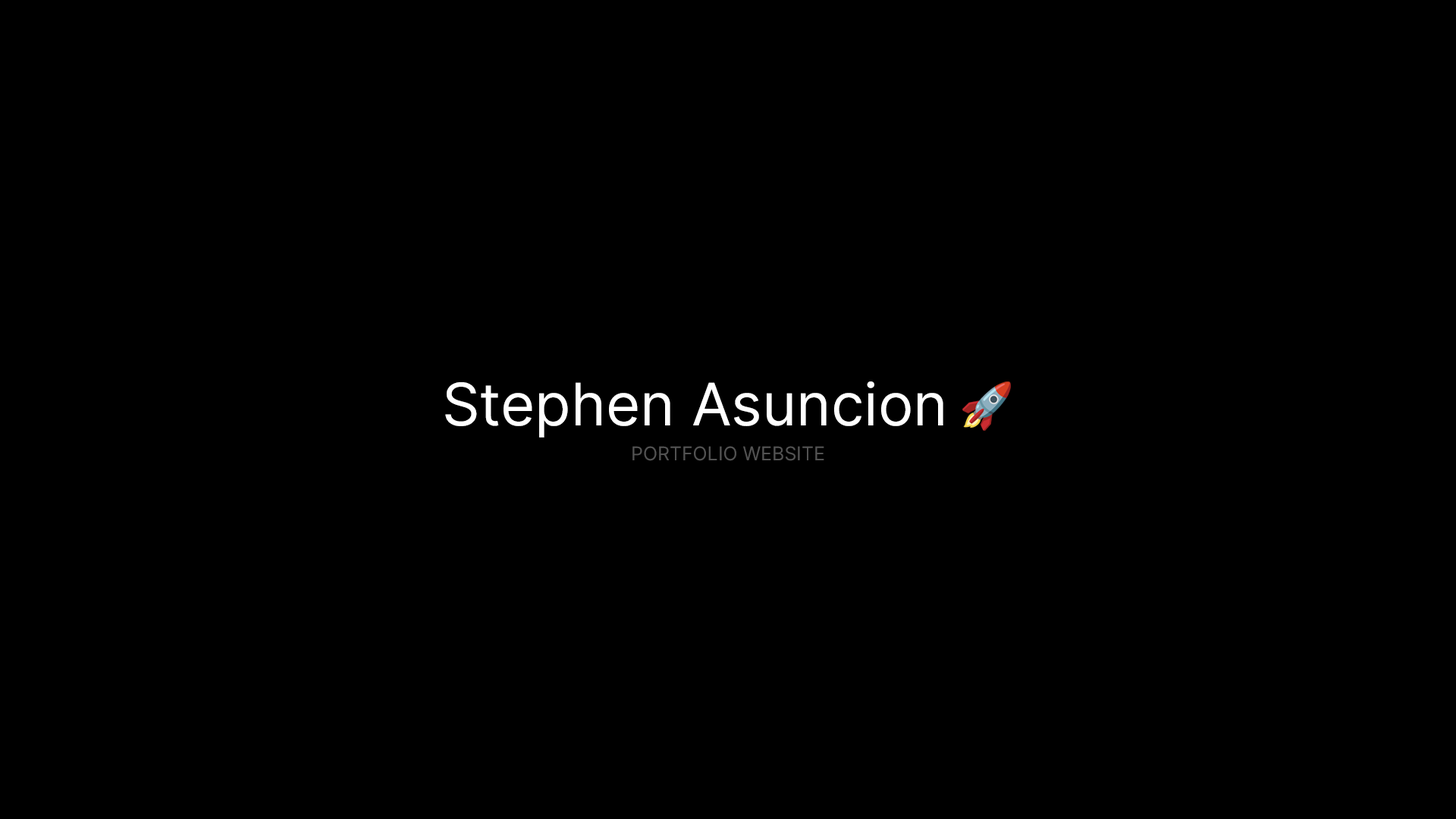
<style>
.page{position:relative;width:1456px;height:819px;background:#000000}
.page>*{position:absolute;margin:0}
.t1{font:58.8px "Inter-Regular";color:#ffffff}
.t2{font:18.9px "Inter-Regular";color:#525252}
</style>
<div class="page">
<p class="t1" style="left:445px;top:381px;width:498px;height:57px">Stephen Asuncion</p>
<p class="t2" style="left:632px;top:446px;width:192px;height:15px">PORTFOLIO WEBSITE</p>
</div>
